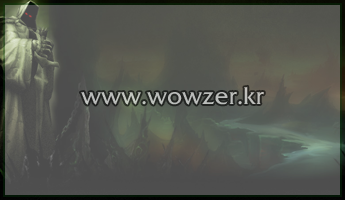
<style>
.page{position:relative;width:345px;height:200px}
.page>*{position:absolute;margin:0}
.t1{font:24px "-2002";color:#bbbdbb}
</style>
<div class="page">
<p class="t1" style="left:80px;top:86px;width:184px;height:19px">www.wowzer.kr</p>
</div>
